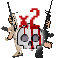
<style>
.page{position:relative;width:58px;height:58px;background:#ffffff}
.page>*{position:absolute;margin:0}
.t1{font:30.1px "RuneScape-UF";color:#b70f0f;scale:0.83 1}
</style>
<div class="page">
<p class="t1" style="left:19px;top:8px;width:21px;height:19px">x2</p>
</div>
